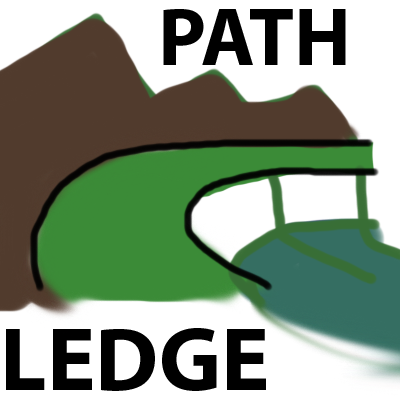
<style>
.page{position:relative;width:400px;height:400px;background:#ffffff}
.page>*{position:absolute;margin:0}
.t1{font:82.4px "MyriadPro-Bold";color:#000000}
.t2{font:91.1px "MyriadPro-Bold";color:#000000}
</style>
<div class="page">
<p class="t1" style="left:163px;top:9px;width:183px;height:56px">PATH</p>
<p class="t2" style="left:6px;top:328px;width:260px;height:63px">LEDGE</p>
</div>
